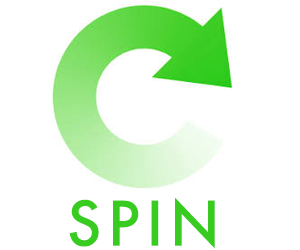
<style>
.page{position:relative;width:300px;height:250px;background:#ffffff}
.page>*{position:absolute;margin:0}
.t1{font:60px "Futura-Medium";letter-spacing:0.1em;color:#38cb20}
</style>
<div class="page">
<p class="t1" style="left:69px;top:197px;width:146px;height:52px">SPIN</p>
</div>
